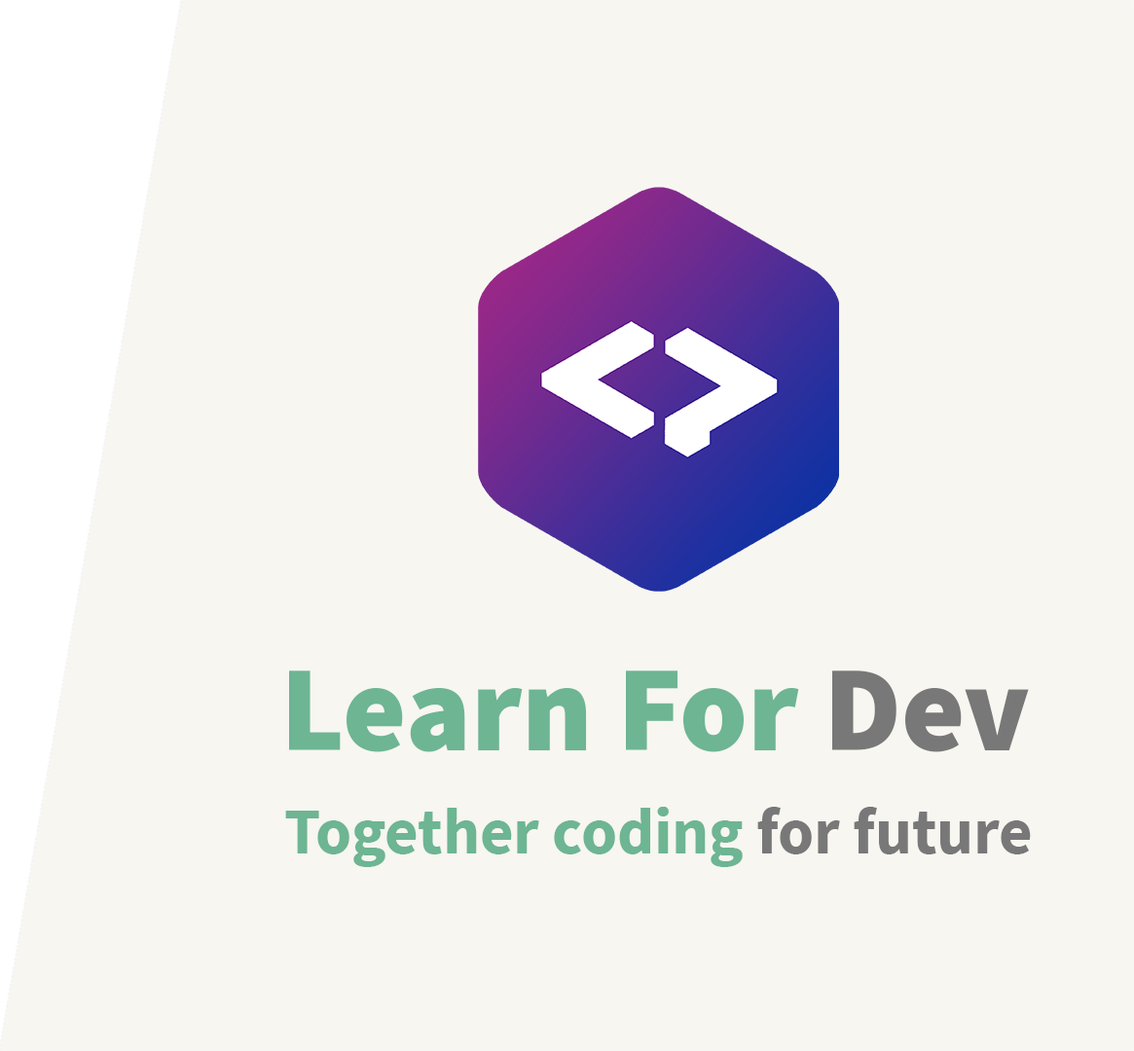
<style>
.page{position:relative;width:1134px;height:1051px;background:#f7f6f1}
.page>*{position:absolute;margin:0}
.t1{font:121.8px "SourceSansPro-Black";color:#6db593}
.t2{font:121.8px "SourceSansPro-Black";color:#787878}
.t3{font:64.9px "SourceSansPro-Bold";color:#6db593}
.t4{font:64.9px "SourceSansPro-Bold";color:#787878}
</style>
<div class="page">
<p class="t1" style="left:289px;top:671px;width:740px;height:82px">Learn For <span class="t2">Dev</span></p>
<p class="t3" style="left:285px;top:806px;width:746px;height:61px">Together coding<span class="t4"> for future</span></p>
</div>
